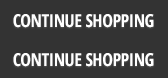
<style>
.page{position:relative;width:168px;height:78px;background:#333333}
.page>*{position:absolute;margin:0}
.t1{font:18px "OpenSans-CondensedBold";letter-spacing:-0.025em;color:#ffffff;text-transform:uppercase}
</style>
<div class="page">
<p class="t1" style="left:13px;top:14px;width:141px;height:14px">Continue Shopping</p>
<p class="t1" style="left:13px;top:53px;width:141px;height:14px">Continue Shopping</p>
</div>
